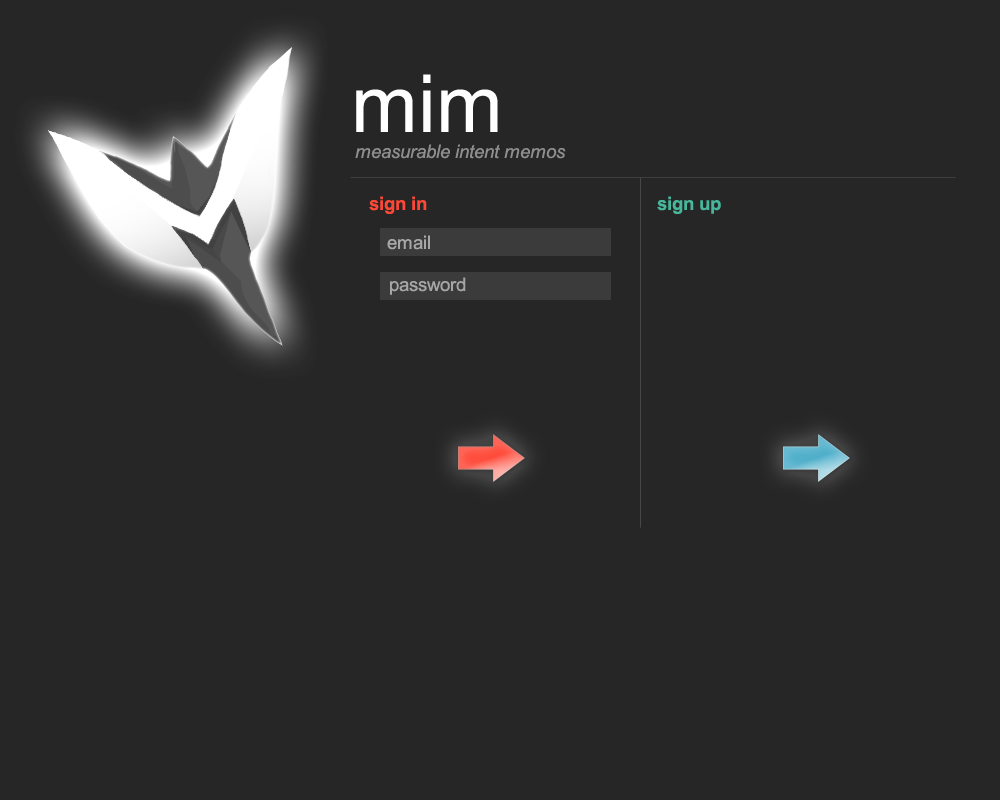
<style>
.page{position:relative;width:1000px;height:800px;background:#262626}
.page>*{position:absolute;margin:0}
.t1{font:80px "ArialMT";color:#ffffff}
.t2{font:18.7px "Arial-ItalicMT";color:#8e8e8e}
.t3{font:18.7px "Arial-BoldMT";color:#fe4837}
.t4{font:18.7px "Arial-BoldMT";color:#46b79b}
.t5{font:18.7px "ArialMT";color:#a7a7a7}
.t6{font:18.7px "ArialMT";color:#a6a6a6}
</style>
<div class="page">
<p class="t1" style="left:356px;top:74px;width:142px;height:58px">mim</p>
<p class="t2" style="left:355px;top:144px;width:211px;height:15px">measurable intent memos</p>
<p class="t3" style="left:369px;top:196px;width:352px;height:18px">sign in       <span class="t4">sign up</span></p>
<p class="t5" style="left:387px;top:235px;width:43px;height:15px">email</p>
<p class="t6" style="left:390px;top:277px;width:76px;height:18px">password</p>
</div>
